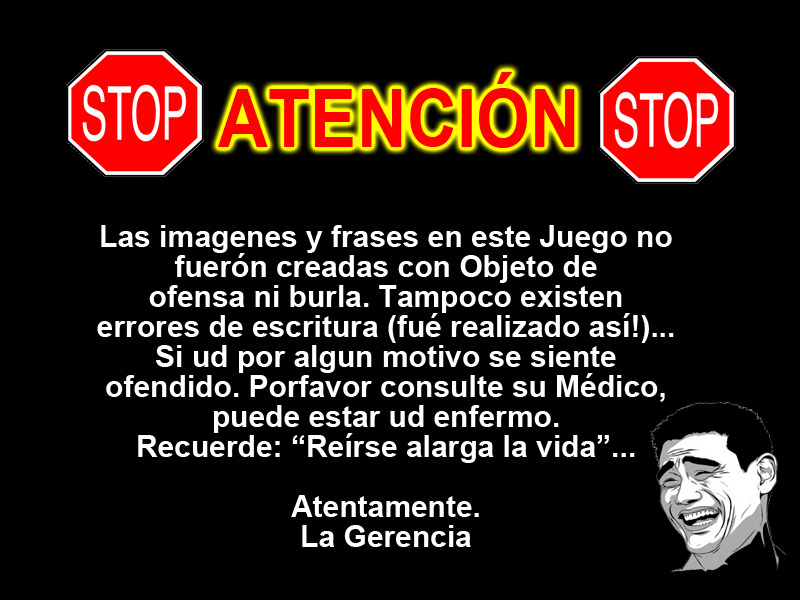
<style>
.page{position:relative;width:800px;height:600px;background:#000000}
.page>*{position:absolute;margin:0}
.t1{font:80.3px "Arial-BoldMT";color:#ff0000;scale:0.86 1}
.t2{font:30px/30px "Arial-BoldMT";color:#ffffff}
</style>
<div class="page">
<p class="t1" style="left:218px;top:72px;width:357px;height:76px">ATENCIÓN</p>
<p class="t2" style="left:97px;top:225px;width:577px;height:322px;text-align:center">Las imagenes y frases en este Juego no fuerón creadas con Objeto de <br>ofensa ni burla. Tampoco existen <br>errores de escritura (fué realizado así!)...<br>Si ud por algun motivo se siente <br>ofendido. Porfavor consulte su Médico, puede estar ud enfermo. <br>Recuerde: “Reírse alarga la vida”...<br> <br>Atentamente.<br>La Gerencia</p>
</div>
